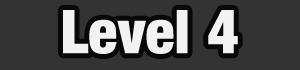
<style>
.page{position:relative;width:300px;height:70px;background:#333333}
.page>*{position:absolute;margin:0}
.t1{font:60px "Harvest";color:#f2f2f2}
</style>
<div class="page">
<p class="t1" style="left:63px;top:10px;width:175px;height:44px">Level 4</p>
</div>
